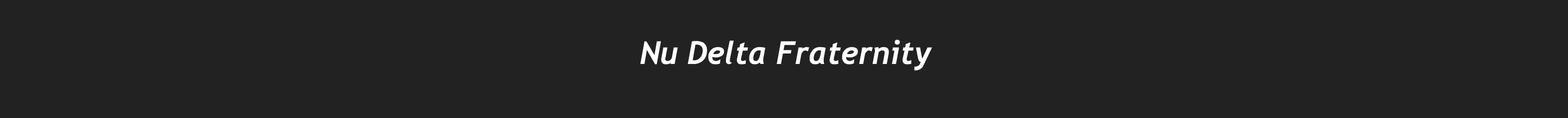
<style>
.page{position:relative;width:1568px;height:118px;background:#222222}
.page>*{position:absolute;margin:0}
.t1{font:31.4px "Trebuchet-BoldItalic";color:#ffffff}
.t2{font:34.5px "Georgia";color:#ffffff}
</style>
<div class="page">
<p class="t1" style="left:640px;top:39px;width:292px;height:32px"><span class="t2"><br></span>Nu Delta Fraternity</p>
</div>
